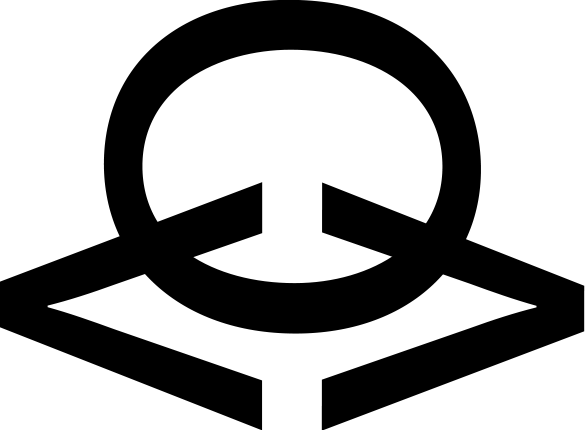
<style>
.page{position:relative;width:585px;height:430px;background:#ffffff}
.page>*{position:absolute;margin:0}
.t1{font:541.7px "MyriadPro-Regular";color:#000000}
</style>
<div class="page">
<p class="t1" style="left:103px;top:0px;width:378px;height:334px;rotate:-90deg">O</p>
<p class="t1" style="left:0px;top:182px;width:263px;height:249px;rotate:90deg">v</p>
<p class="t1" style="left:321px;top:182px;width:264px;height:249px;rotate:-90deg">v</p>
</div>
